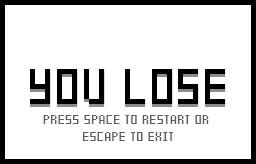
<style>
.page{position:relative;width:256px;height:164px;background:#ffffff}
.page>*{position:absolute;margin:0}
.t1{font:66.7px "CyrBit";color:#000000}
.t2{font:18.3px/16.7px "CyrBit";color:#5d5d5d}
</style>
<div class="page">
<p class="t1" style="left:30px;top:69px;width:196px;height:35px">YOU LOSE</p>
<p class="t2" style="left:43px;top:115px;width:166px;height:26px;text-align:center">PRESS SPACE TO RESTART OR <br>ESCAPE TO EXIT</p>
</div>
